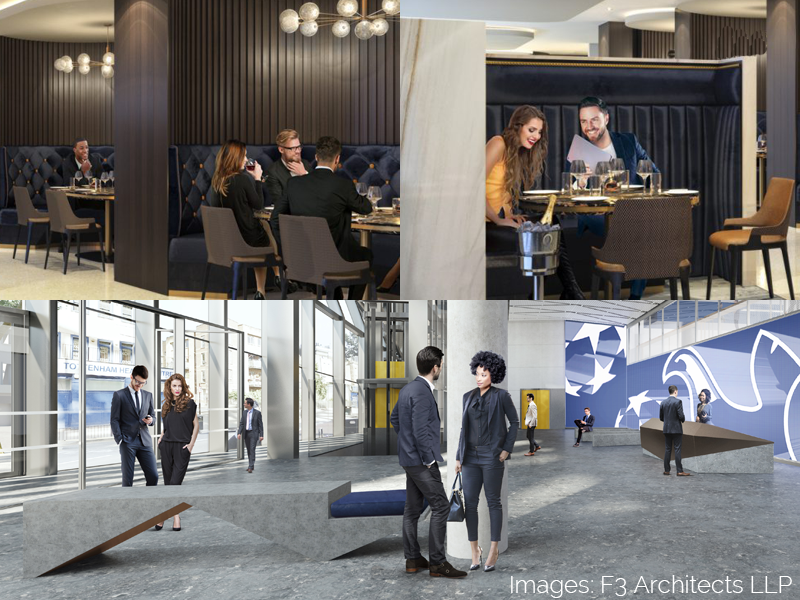
<style>
.page{position:relative;width:800px;height:600px}
.page>*{position:absolute;margin:0}
.t1{font:24px "Raleway-Light";color:#ffffff}
</style>
<div class="page">
<p class="t1" style="left:511px;top:575px;width:281px;height:23px">Images: F3 Architects LLP</p>
</div>
